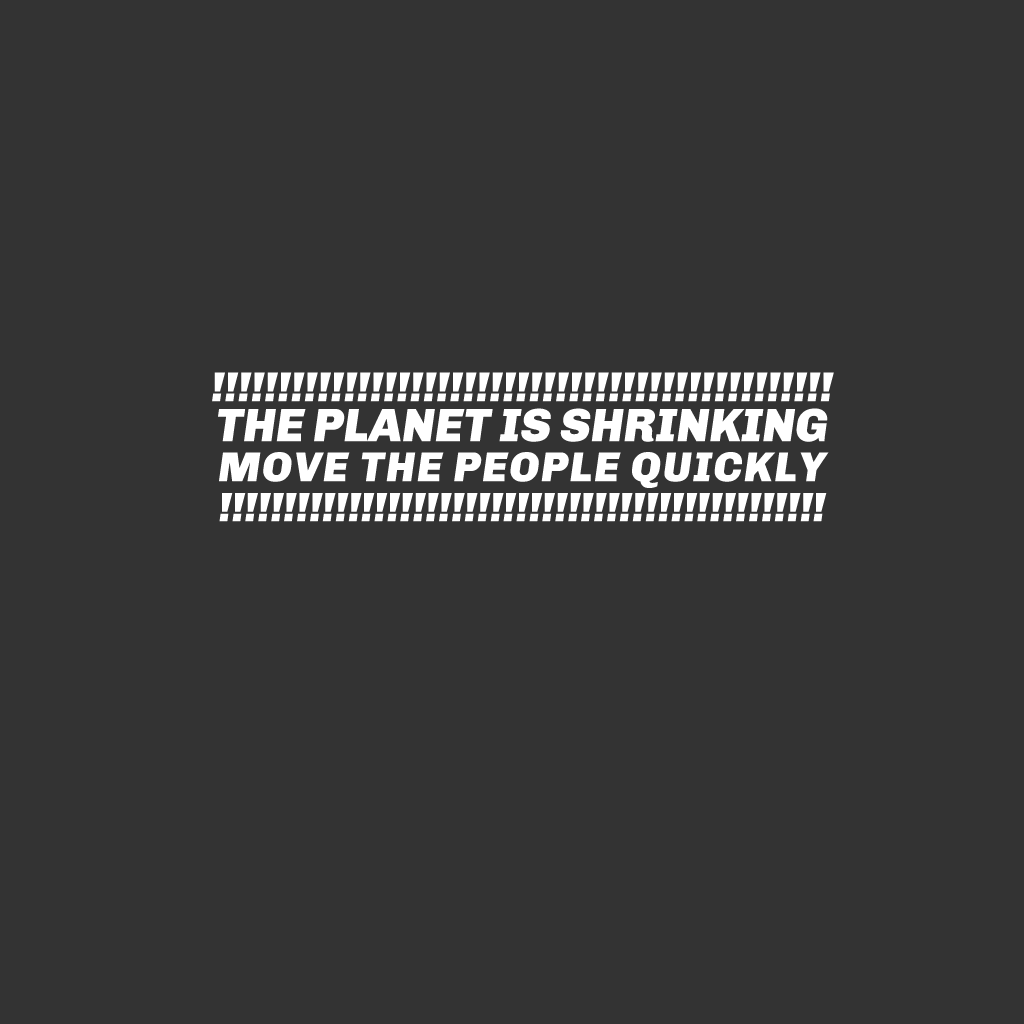
<style>
.page{position:relative;width:1024px;height:1024px;background:#333333}
.page>*{position:absolute;margin:0}
.t1{font:42px/40px "Chivo-BlackItalic";color:#ffffff}
.t2{font:47px/40px "Chivo-BlackItalic";color:#ffffff}
.t3{font:42px/40px "Chivo-BlackItalic";letter-spacing:0.04em;color:#ffffff}
.t4{font:41px/40px "Chivo-BlackItalic";color:#ffffff}
</style>
<div class="page">
<p class="t1" style="left:212px;top:372px;width:622px;height:150px;text-align:center">!!!!!!!!!!!!!!!!!!!!!!!!!!!!!!!!!!!!!!!!!!!!!!!<br><span class="t2">THE PLANET IS SHRINKING<br></span><span class="t3">MOVE THE PEOPLE QUICKLY<br></span><span class="t4">!!!!!!!!!!!!!!!!!!!!!!!!!!!!!!!!!!!!!!!!!!!!!!!</span></p>
</div>
